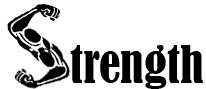
<style>
.page{position:relative;width:206px;height:89px;background:#ffffff}
.page>*{position:absolute;margin:0}
.t1{font:48px "BernardMT-Condensed";color:#000000}
</style>
<div class="page">
<p class="t1" style="left:70px;top:45px;width:133px;height:44px">trength</p>
</div>
